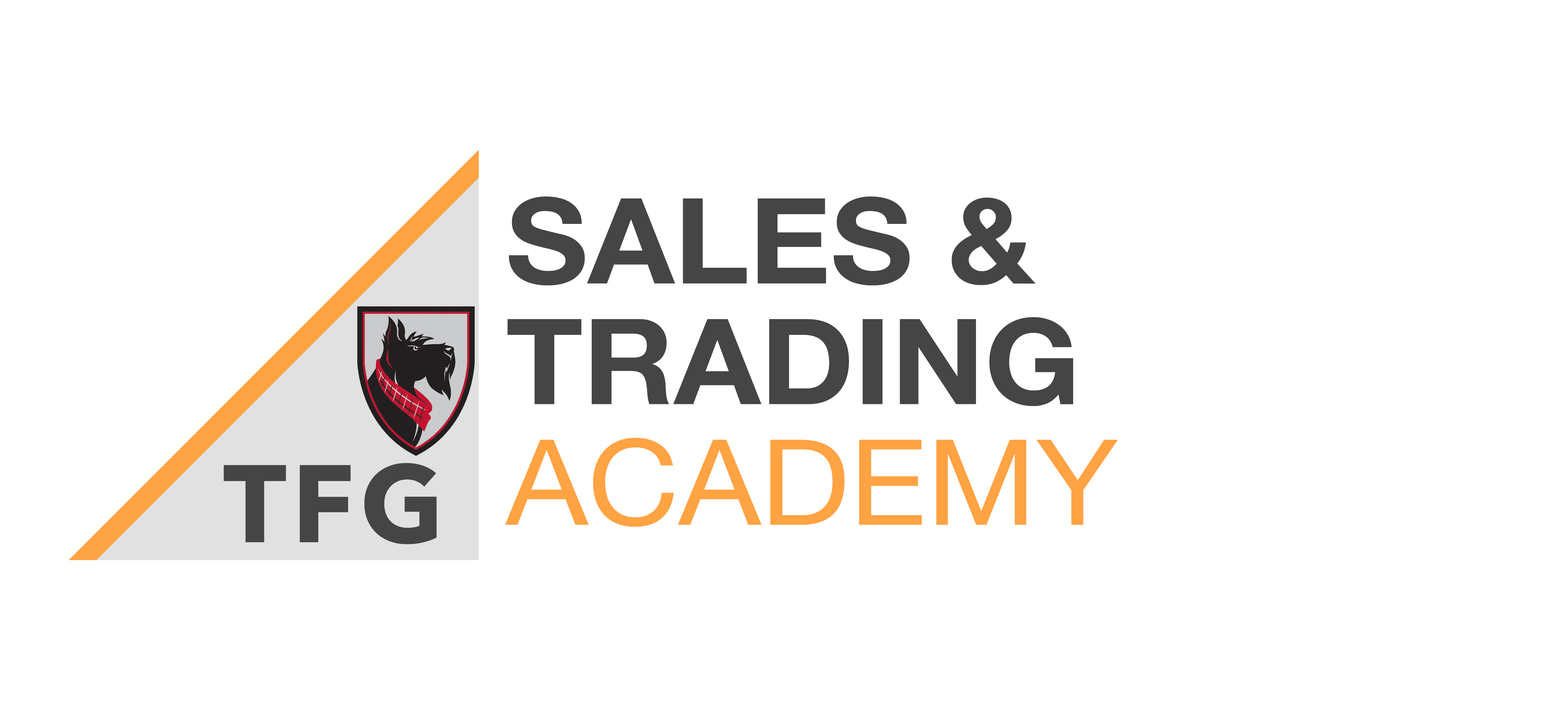
<style>
.page{position:relative;width:1568px;height:724px;background:#ffffff}
.page>*{position:absolute;margin:0}
.t1{font:118.9px/120.6px "HelveticaNeue-Bold";color:#454545;scale:1.06 1}
.t2{font:118.9px/120.6px "HelveticaNeue";color:#ffa343;scale:1.06 1}
.t3{font:108.9px "AvenirNext-Bold";letter-spacing:0.05em;color:#454545}
</style>
<div class="page">
<p class="t1" style="left:505px;top:196px;width:613px;height:331px">SALES &amp;<br>TRADING<br><span class="t2">ACADEMY</span></p>
<p class="t3" style="left:223px;top:463px;width:214px;height:81px">TFG</p>
</div>
